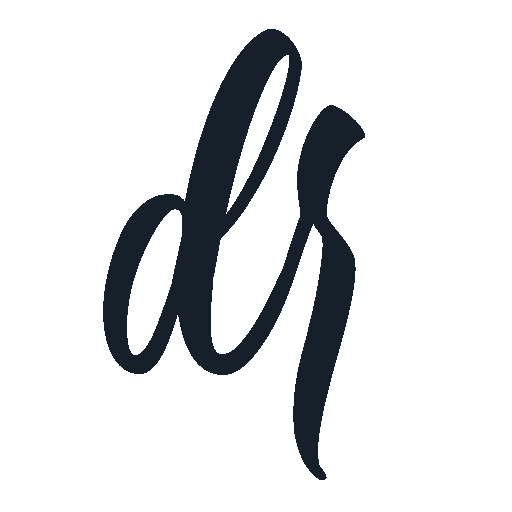
<style>
.page{position:relative;width:512px;height:512px;background:#ffffff}
.page>*{position:absolute;margin:0}
.t1{font:350px "CarandaPersonalUse";color:#15202b}
</style>
<div class="page">
<p class="t1" style="left:103px;top:29px;width:262px;height:451px">dr</p>
</div>
